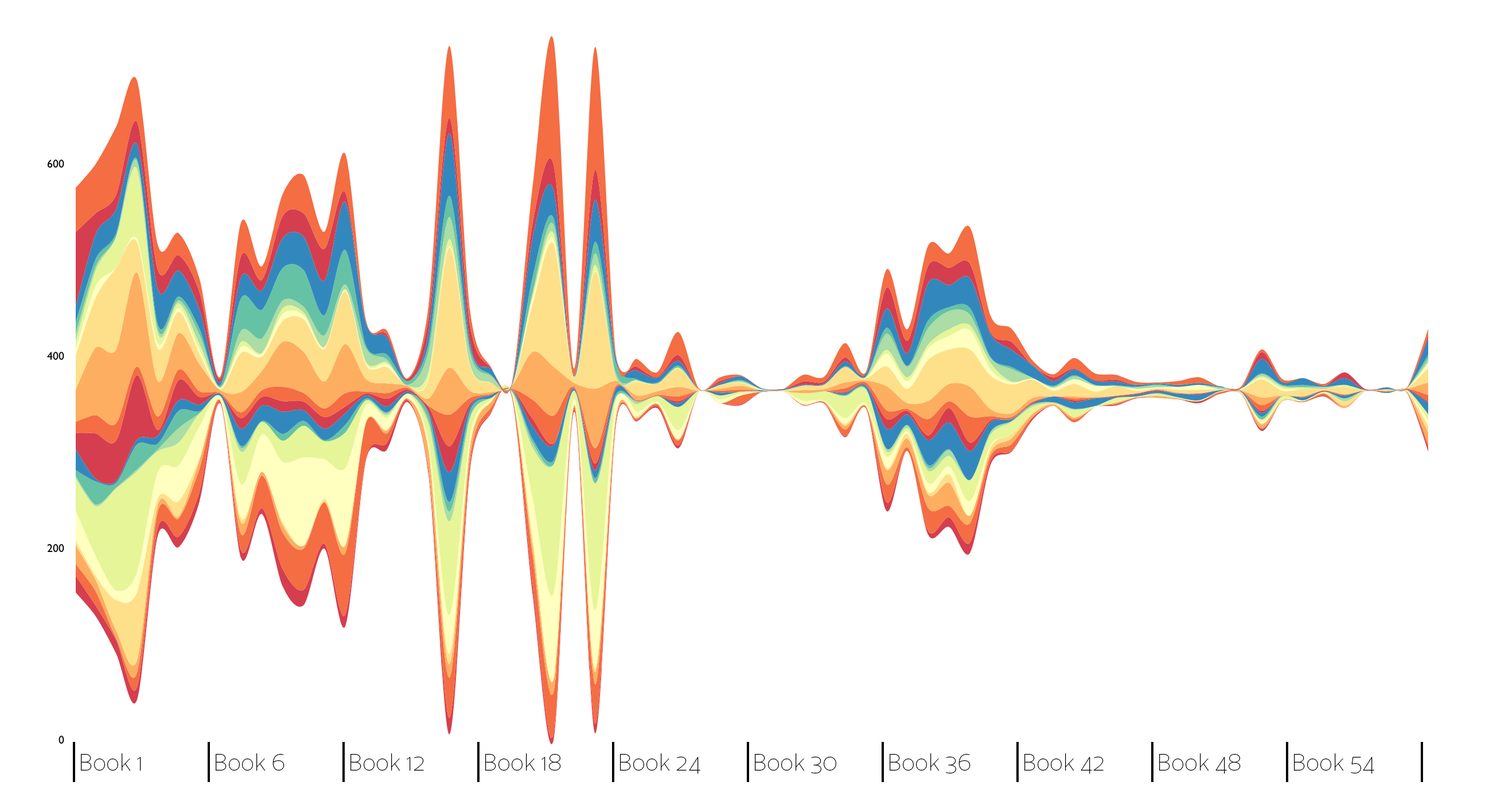
<style>
.page{position:relative;width:1489px;height:801px;background:#ffffff}
.page>*{position:absolute;margin:0}
.t1{font:22.9px "Cresta-Hairline";color:#000000}
</style>
<div class="page">
<p class="t1" style="left:81px;top:753px;width:60px;height:17px">Book 1</p>
<p class="t1" style="left:216px;top:753px;width:69px;height:17px">Book 6</p>
<p class="t1" style="left:350px;top:753px;width:74px;height:17px">Book 12</p>
<p class="t1" style="left:485px;top:753px;width:76px;height:17px">Book 18</p>
<p class="t1" style="left:620px;top:753px;width:80px;height:21px">Book 24</p>
<p class="t1" style="left:755px;top:753px;width:81px;height:20px">Book 30</p>
<p class="t1" style="left:890px;top:753px;width:81px;height:20px">Book 36</p>
<p class="t1" style="left:1024px;top:753px;width:80px;height:21px">Book 42</p>
<p class="t1" style="left:1159px;top:753px;width:82px;height:21px">Book 48</p>
<p class="t1" style="left:1294px;top:753px;width:80px;height:21px">Book 54</p>
</div>
